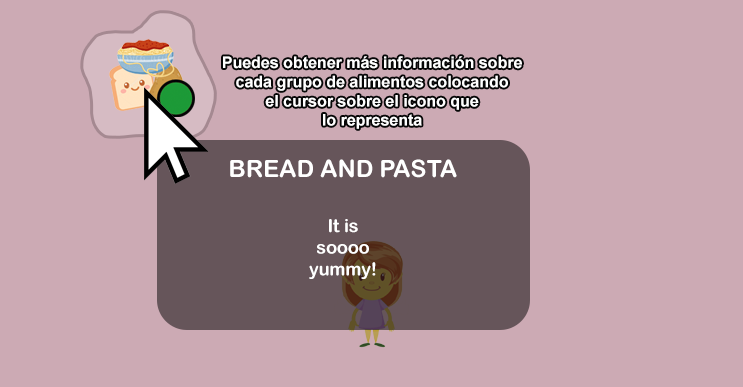
<style>
.page{position:relative;width:743px;height:387px;background:#ccaab4}
.page>*{position:absolute;margin:0}
.t1{font:16px "Arial-BoldMT";color:#ffffff}
.t2{font:24px "ArialRoundedMTBold";color:#ffffff}
.t3{font:18px "ArialRoundedMTBold";color:#ffffff}
</style>
<div class="page">
<p class="t1" style="left:223px;top:56px;width:299px;height:73px;text-align:center">Puedes obtener más información sobre<br>cada grupo de alimentos colocando<br>el cursor sobre el icono que<br>lo representa</p>
<p class="t2" style="left:230px;top:159px;width:227px;height:19px">BREAD AND PASTA</p>
<p class="t3" style="left:309px;top:219px;width:67px;height:60px;text-align:center">It is<br>soooo<br>yummy!</p>
</div>
